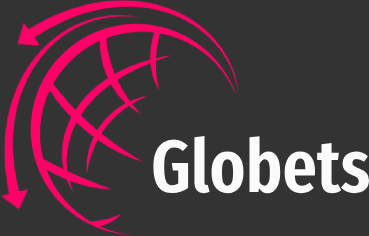
<style>
.page{position:relative;width:369px;height:236px;background:#333333}
.page>*{position:absolute;margin:0}
.t1{font:74px "FiraSansExtraCondensed-SemiBold";color:#fbfbfb}
</style>
<div class="page">
<p class="t1" style="left:153px;top:136px;width:217px;height:58px">Globets</p>
</div>
